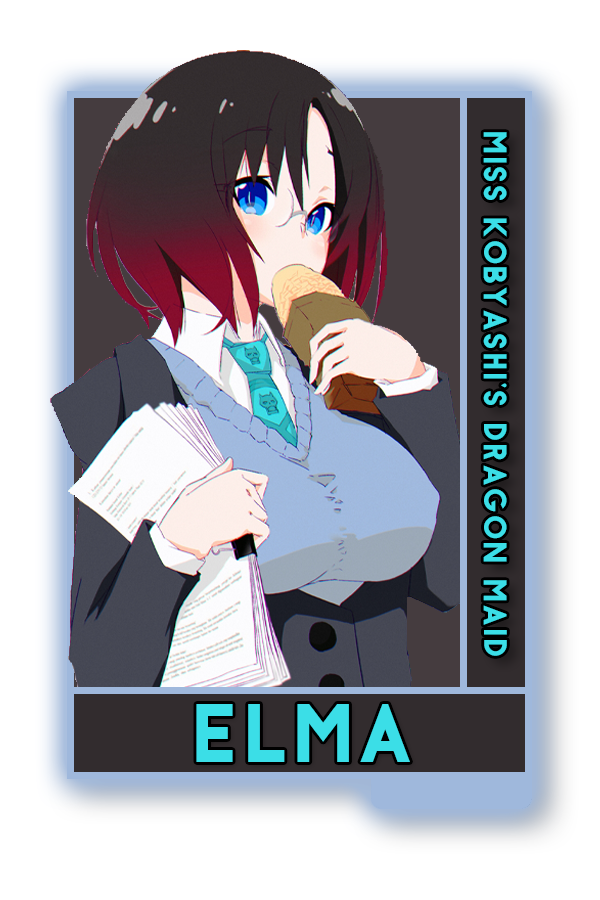
<style>
.page{position:relative;width:600px;height:900px;background:#ffffff}
.page>*{position:absolute;margin:0}
.t1{font:29.2px "Antraste";color:#3bdee7}
.t2{font:75px "Antraste";color:#3bdee7}
</style>
<div class="page">
<p class="t1" style="left:483px;top:132px;width:24px;height:524px;rotate:90deg">MISS KOBYASHI'S DRAGON MAID</p>
<p class="t2" style="left:196px;top:704px;width:214px;height:58px">ELMA</p>
</div>
